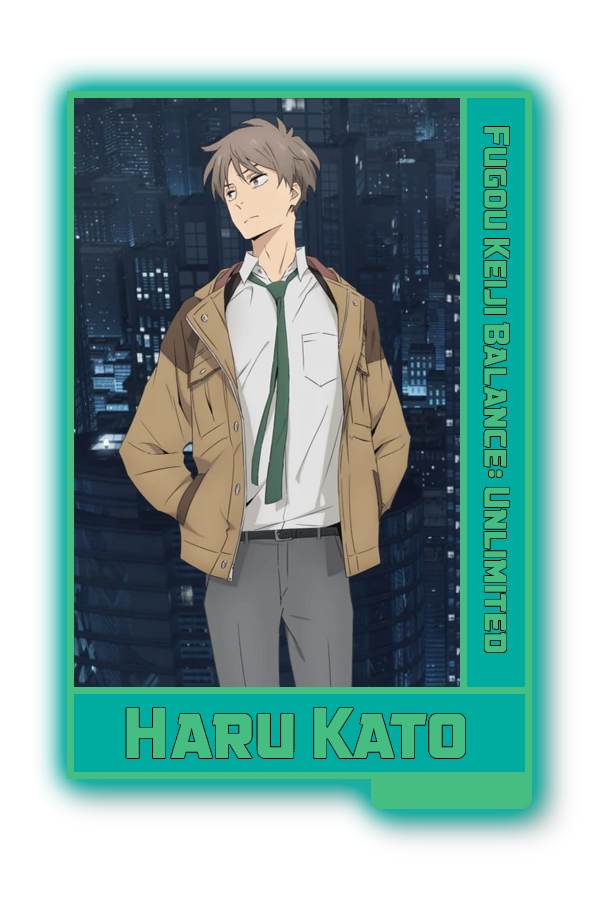
<style>
.page{position:relative;width:600px;height:900px;background:#ffffff}
.page>*{position:absolute;margin:0}
.t1{font:37.3px "GovernmentAgentBB";color:#46bd81}
.t2{font:75px "GovernmentAgentBB";color:#46bd81}
</style>
<div class="page">
<p class="t1" style="left:484px;top:127px;width:26px;height:526px;rotate:90deg">Fugou Keiji Balance: Unlimited</p>
<p class="t2" style="left:126px;top:707px;width:340px;height:51px">Haru Kato</p>
</div>
